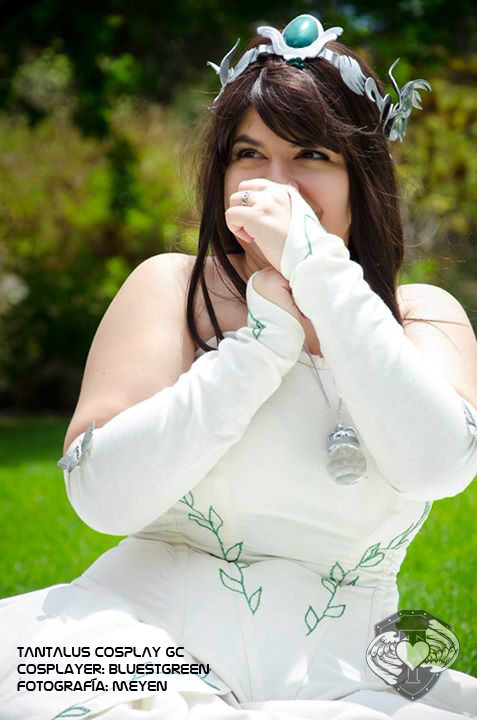
<style>
.page{position:relative;width:477px;height:720px}
.page>*{position:absolute;margin:0}
.t1{font:14px "NasalizationRg-Regular";color:#000108}
</style>
<div class="page">
<p class="t1" style="left:17px;top:647px;width:192px;height:44px">TANTALUS COSPLAY GC<br>cosplayer: bluestgreen<br>fotografía: meyen</p>
</div>
